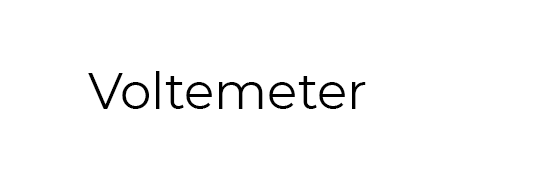
<style>
.page{position:relative;width:533px;height:180px;background:#ffffff}
.page>*{position:absolute;margin:0}
.t1{font:50px "Montserrat-Regular";color:#000000}
</style>
<div class="page">
<p class="t1" style="left:88px;top:71px;width:278px;height:38px">Voltemeter</p>
</div>
